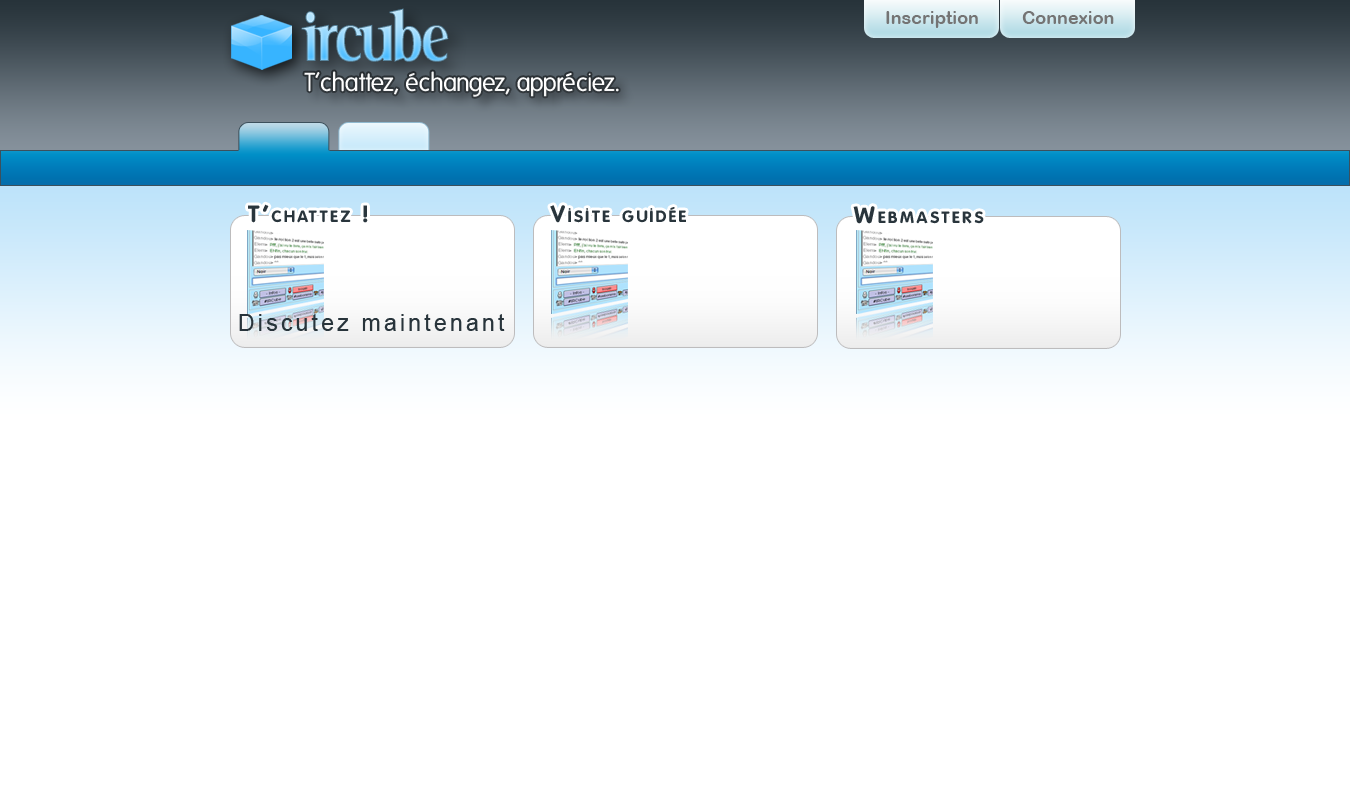
<style>
.page{position:relative;width:1350px;height:800px;background:#ffffff}
.page>*{position:absolute;margin:0}
.t1{font:79.5px "SerifNarrow"}
.t2{font:18px "ArialRoundedMTBold";color:#747474}
.t3{font:25.3px "Folks-Normal";color:#ffffff}
.t4{font:23px "Folks-Bold";letter-spacing:0.14em;color:#29353c;font-variant:small-caps}
.t5{font:23px "ArialMT";letter-spacing:0.14em;color:#28343b}
</style>
<div class="page">
<p class="t1" style="left:301px;top:8px;width:148px;height:54px">ircube</p>
<p class="t2" style="left:886px;top:11px;width:92px;height:17px">Inscription</p>
<p class="t2" style="left:1022px;top:11px;width:92px;height:13px">Connexion</p>
<p class="t3" style="left:304px;top:71px;width:315px;height:26px">T’chattez, échangez, appréciez.</p>
<p class="t4" style="left:248px;top:204px;width:120px;height:19px">T’chattez !</p>
<p class="t4" style="left:550px;top:205px;width:136px;height:18px">Visite guidée</p>
<p class="t4" style="left:853px;top:206px;width:131px;height:18px">Webmasters</p>
<p class="t5" style="left:239px;top:314px;width:266px;height:17px">Discutez maintenant</p>
</div>
